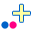
<style>
.page{position:relative;width:32px;height:32px;background:#ffffff}
.page>*{position:absolute;margin:0}
.t1{font:36px "ArialMT";color:#ffffa2}
</style>
<div class="page">
<p class="t1" style="left:13px;top:4px;width:17px;height:18px">+</p>
</div>
